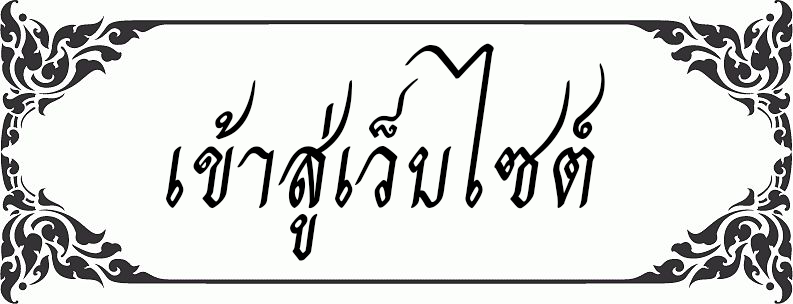
<style>
.page{position:relative;width:793px;height:304px;background:#fcfefb}
.page>*{position:absolute;margin:0}
.t1{font:150px "THCharmofAU";color:#000000}
</style>
<div class="page">
<p class="t1" style="left:166px;top:43px;width:439px;height:218px">เข้าสู่เว็บไซต์</p>
</div>
